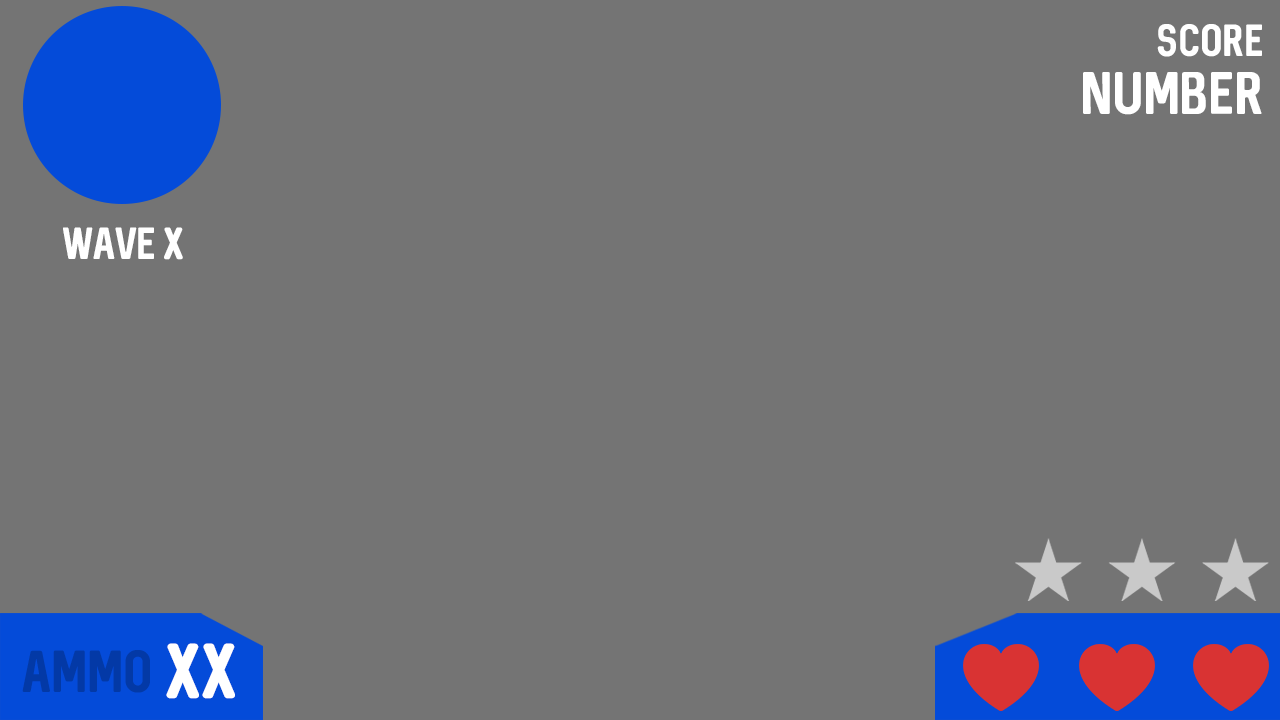
<style>
.page{position:relative;width:1280px;height:720px;background:#747474}
.page>*{position:absolute;margin:0}
.t1{font:48px "Sequel-Regular";color:#ffffff}
.t2{font:36px "Sequel-Regular";color:#ffffff}
.t3{font:47.3px "Sequel-Regular";color:#0339a6}
.t4{font:61.9px "Sequel-Regular";color:#ffffff}
</style>
<div class="page">
<p class="t1" style="left:1083px;top:24px;width:179px;height:91px;text-align:right"><span class="t2">score<br></span>number</p>
<p class="t2" style="left:63px;top:227px;width:120px;height:33px">wave x</p>
<p class="t3" style="left:22px;top:650px;width:128px;height:43px">Ammo</p>
<p class="t4" style="left:166px;top:643px;width:69px;height:56px">XX</p>
</div>
